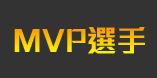
<style>
.page{position:relative;width:157px;height:78px;background:#333333}
.page>*{position:absolute;margin:0}
.t1{font:30px "MStiffHeiHK-Bold";text-transform:uppercase}
</style>
<div class="page">
<p class="t1" style="left:14px;top:27px;width:131px;height:27px">MVP選手</p>
</div>
